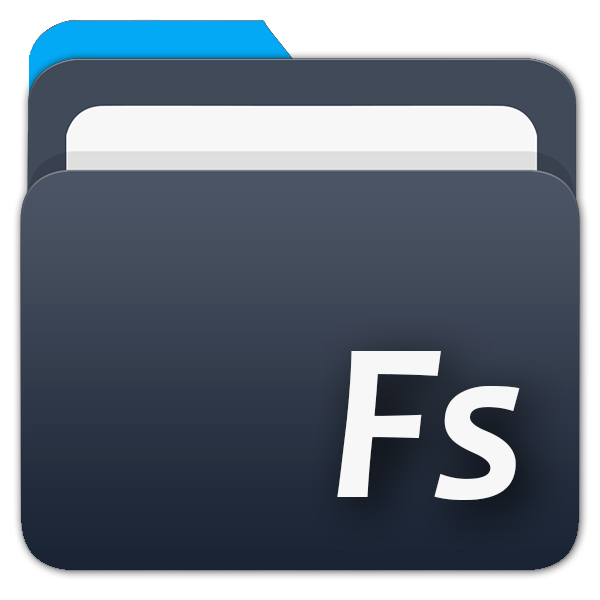
<style>
.page{position:relative;width:600px;height:600px}
.page>*{position:absolute;margin:0}
.t1{font:230px "Candara-BoldItalic";color:#f7f7f8}
</style>
<div class="page">
<p class="t1" style="left:337px;top:351px;width:183px;height:149px">Fs</p>
</div>
